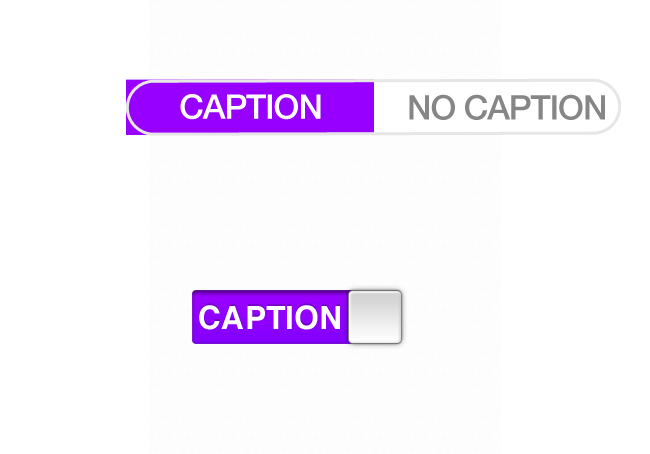
<style>
.page{position:relative;width:650px;height:454px;background:#ffffff}
.page>*{position:absolute;margin:0}
.t1{font:34px "HelveticaNeue-Medium";letter-spacing:-0.03em;color:#ffffff}
.t2{font:34px "HelveticaNeue-Medium";letter-spacing:-0.03em;color:#868686}
</style>
<div class="page">
<p class="t1" style="left:180px;top:94px;width:141px;height:26px">CAPTION</p>
<p class="t2" style="left:409px;top:94px;width:196px;height:26px">NO CAPTION</p>
</div>
